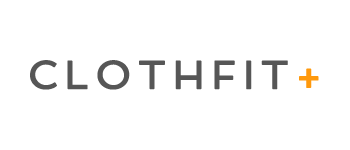
<style>
.page{position:relative;width:350px;height:150px;background:#ffffff}
.page>*{position:absolute;margin:0}
.t1{font:68.1px "Spinnaker-Regular";letter-spacing:0.15em;color:#565656;text-transform:uppercase;font-weight:bold}
.t2{font:68.1px "Spinnaker-Regular";letter-spacing:0.15em;color:#ff990c;text-transform:uppercase;font-weight:bold}
</style>
<div class="page">
<p class="t1" style="left:30px;top:60px;width:289px;height:30px">clothfit<span class="t2">+</span></p>
</div>
